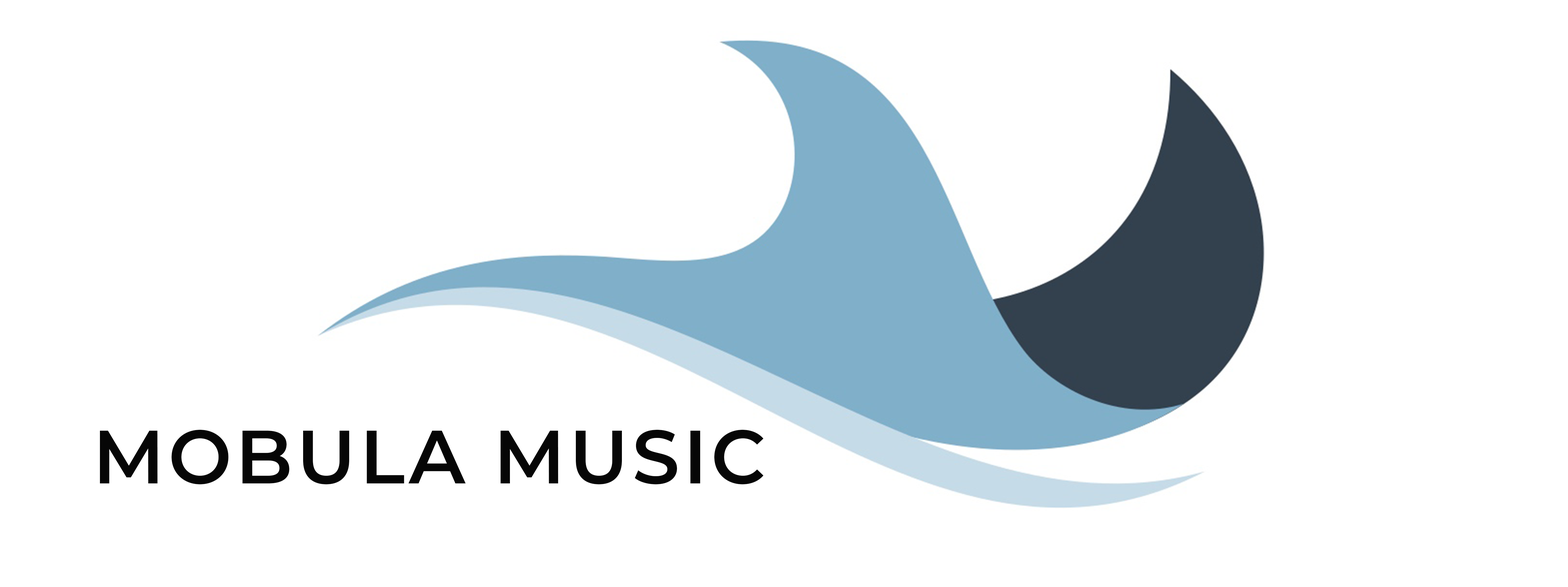
<style>
.page{position:relative;width:1568px;height:587px;background:#ffffff}
.page>*{position:absolute;margin:0}
.t1{font:75.3px "Montserrat-SemiBold";letter-spacing:0.05em;color:#060606;text-transform:uppercase}
</style>
<div class="page">
<p class="t1" style="left:100px;top:430px;width:663px;height:54px">Mobula Music</p>
</div>
